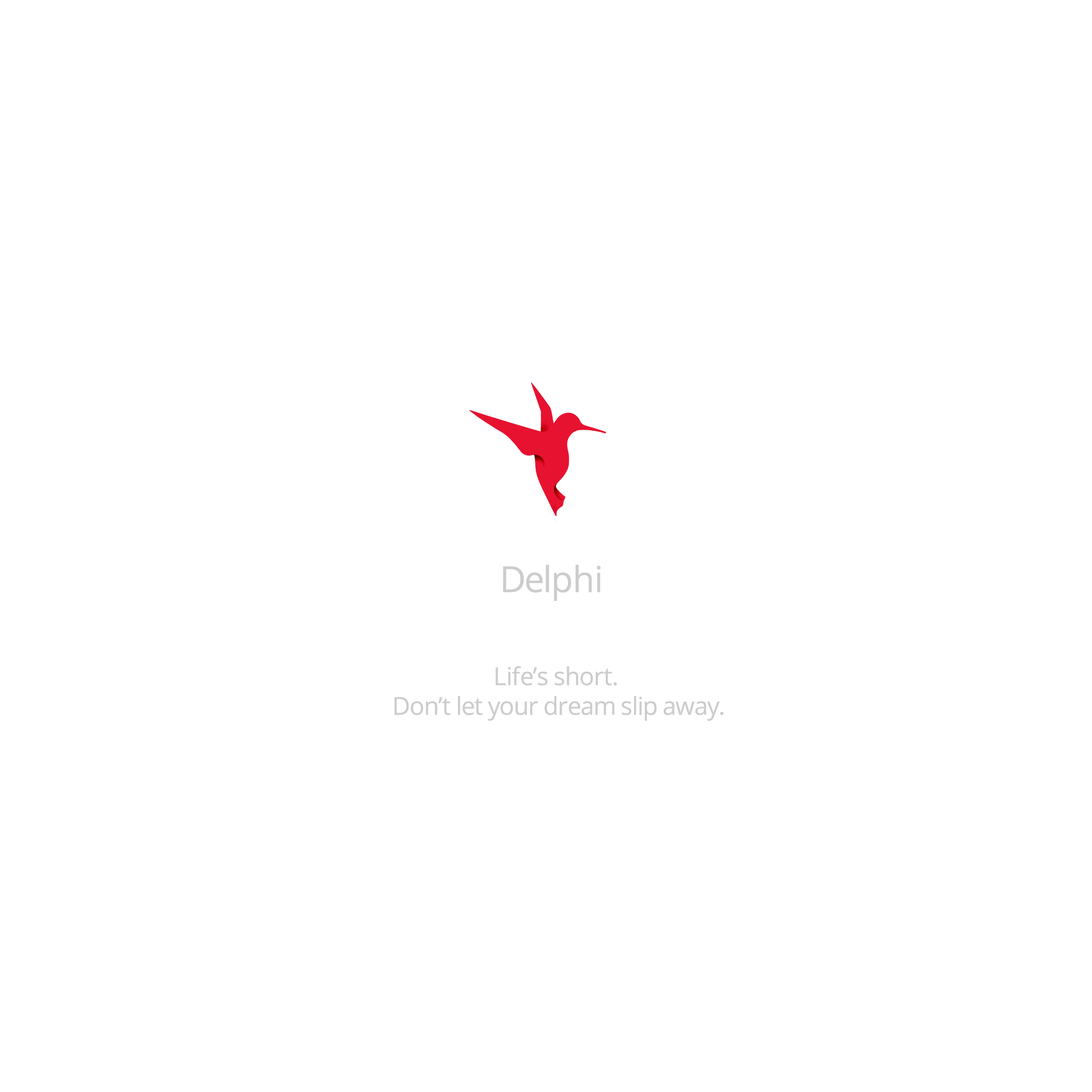
<style>
.page{position:relative;width:1092px;height:1092px;background:#ffffff}
.page>*{position:absolute;margin:0}
.t1{font:36px "OpenSans";letter-spacing:-0.025em;color:#cccccc}
.t2{font:24.7px "OpenSans";letter-spacing:-0.025em;color:#cccccc}
</style>
<div class="page">
<p class="t1" style="left:503px;top:565px;width:98px;height:36px">Delphi</p>
<p class="t2" style="left:394px;top:666px;width:330px;height:55px;text-align:center">Life’s short. <br>Don’t let your dream slip away.</p>
</div>
